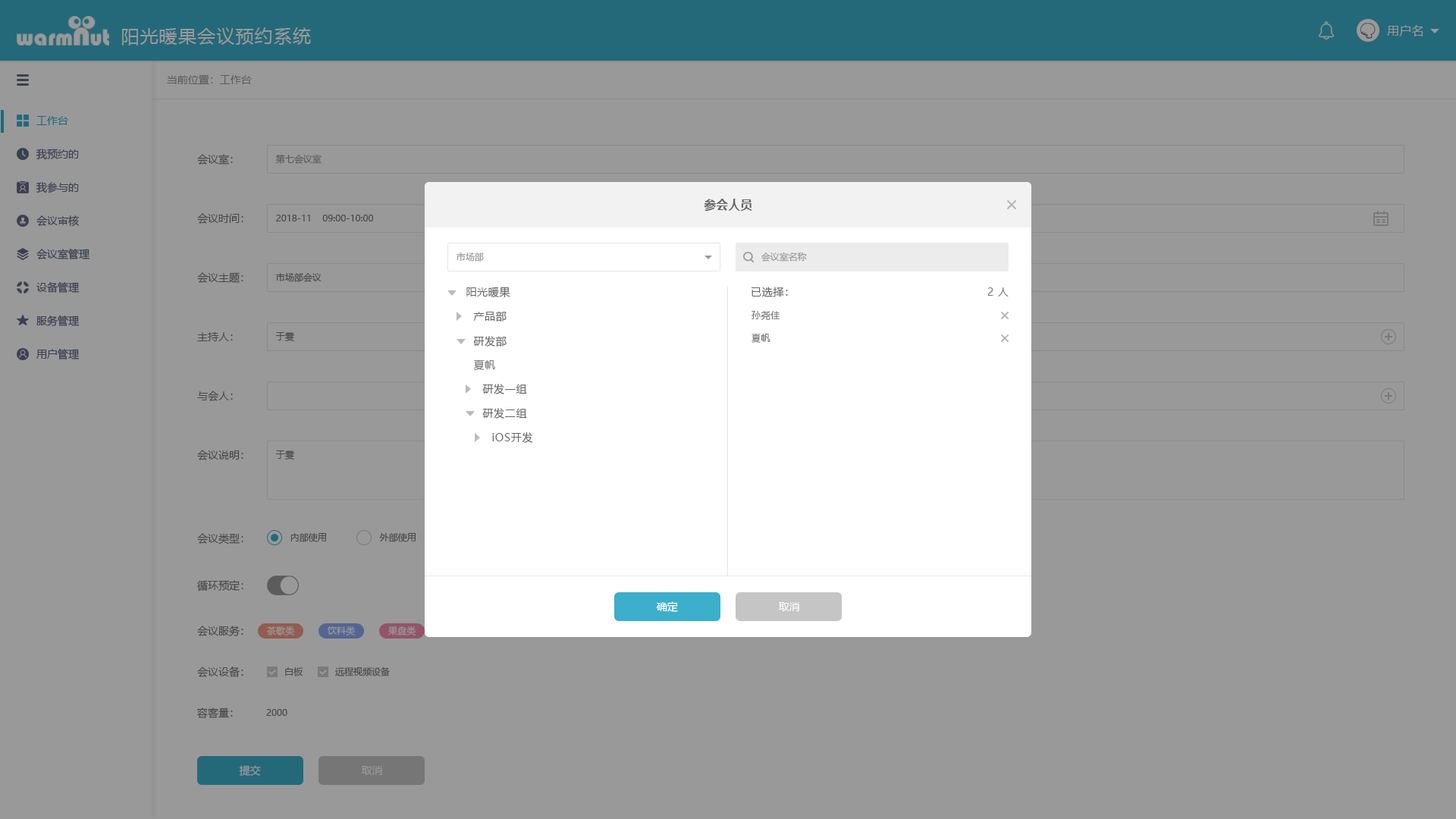
<style>
.page{position:relative;width:1456px;height:819px;background:#999999}
.page>*{position:absolute;margin:0}
.t1{font:18.2px "MicrosoftYaHei";letter-spacing:0.05em;color:#999999}
.t2{font:12.1px "MicrosoftYaHei";letter-spacing:0.025em;color:#999999}
.t3{font:10.6px "MicrosoftYaHei";color:#5c5c5c}
.t4{font:10.6px "MicrosoftYaHei";color:#24697a}
.t5{font:10.6px "MicrosoftYaHei";color:#3a4053}
.t6{font:10.6px "MicrosoftYaHei";color:#474747}
.t7{font:9.1px "MicrosoftYaHei";color:#5c5c5c}
.t8{font:12.1px "MicrosoftYaHei-Bold";color:#666666}
.t9{font:9.1px "MicrosoftYaHei";color:#474747}
.t10{font:9.1px "MicrosoftYaHei";color:#999999}
.t11{font:10.6px "MicrosoftYaHei";letter-spacing:0.05em;color:#666666}
.t12{font:10.6px "MicrosoftYaHei";letter-spacing:0.05em;color:#777777}
.t13{font:9.1px "MicrosoftYaHei";letter-spacing:0.05em;color:#777777}
.t14{font:10.6px "MicrosoftYaHei";color:#ffffff}
.t15{font:10.6px "MicrosoftYaHei";color:#999999}
</style>
<div class="page">
<p class="t1" style="left:122px;top:27px;width:189px;height:18px">阳光暖果会议预约系统</p>
<p class="t2" style="left:1387px;top:25px;width:36px;height:11px">用户名</p>
<p class="t3" style="left:167px;top:75px;width:85px;height:10px">当前位置：工作台</p>
<p class="t4" style="left:36px;top:116px;width:32px;height:9px">工作台</p>
<p class="t5" style="left:36px;top:149px;width:43px;height:11px">我预约的</p>
<p class="t6" style="left:197px;top:154px;width:36px;height:11px">会议室：</p>
<p class="t7" style="left:275px;top:154px;width:47px;height:10px">第七会议室</p>
<p class="t5" style="left:36px;top:182px;width:43px;height:11px">我参与的</p>
<p class="t8" style="left:704px;top:199px;width:48px;height:13px">参会人员</p>
<p class="t5" style="left:36px;top:215px;width:43px;height:12px">会议审核</p>
<p class="t6" style="left:197px;top:213px;width:46px;height:11px">会议时间：</p>
<p class="t9" style="left:276px;top:215px;width:98px;height:6px">2018-11    09:00-10:00</p>
<p class="t5" style="left:36px;top:249px;width:54px;height:10px">会议室管理</p>
<p class="t10" style="left:457px;top:253px;width:27px;height:9px">市场部</p>
<p class="t10" style="left:761px;top:252px;width:46px;height:10px">会议室名称</p>
<p class="t6" style="left:197px;top:272px;width:46px;height:11px">会议主题：</p>
<p class="t9" style="left:276px;top:273px;width:46px;height:9px">市场部会议</p>
<p class="t5" style="left:36px;top:282px;width:44px;height:11px">设备管理</p>
<p class="t11" style="left:466px;top:287px;width:44px;height:11px">阳光暖果</p>
<p class="t11" style="left:751px;top:287px;width:37px;height:10px">已选择：</p>
<p class="t12" style="left:987px;top:287px;width:22px;height:10px">2 人</p>
<p class="t5" style="left:36px;top:315px;width:44px;height:11px">服务管理</p>
<p class="t11" style="left:473px;top:311px;width:34px;height:11px">产品部</p>
<p class="t13" style="left:751px;top:310px;width:29px;height:10px">孙尧佳</p>
<p class="t6" style="left:197px;top:332px;width:36px;height:9px">主持人：</p>
<p class="t9" style="left:275px;top:332px;width:19px;height:9px">于雯</p>
<p class="t11" style="left:473px;top:336px;width:34px;height:11px">研发部</p>
<p class="t13" style="left:751px;top:334px;width:19px;height:9px">夏帆</p>
<p class="t5" style="left:36px;top:349px;width:44px;height:10px">用户管理</p>
<p class="t12" style="left:473px;top:359px;width:22px;height:12px">夏帆</p>
<p class="t11" style="left:482px;top:384px;width:45px;height:10px">研发一组</p>
<p class="t6" style="left:197px;top:391px;width:36px;height:10px">与会人：</p>
<p class="t11" style="left:482px;top:408px;width:45px;height:11px">研发二组</p>
<p class="t11" style="left:492px;top:432px;width:41px;height:11px">iOS开发</p>
<p class="t6" style="left:197px;top:450px;width:46px;height:10px">会议说明：</p>
<p class="t9" style="left:275px;top:450px;width:19px;height:10px">于雯</p>
<p class="t6" style="left:197px;top:533px;width:46px;height:11px">会议类型：</p>
<p class="t9" style="left:290px;top:532px;width:36px;height:10px">内部使用</p>
<p class="t9" style="left:379px;top:532px;width:37px;height:10px">外部使用</p>
<p class="t6" style="left:197px;top:580px;width:46px;height:11px">循环预定：</p>
<p class="t14" style="left:656px;top:601px;width:22px;height:11px">确定</p>
<p class="t14" style="left:778px;top:602px;width:21px;height:9px">取消</p>
<p class="t6" style="left:197px;top:626px;width:46px;height:10px">会议服务：</p>
<p class="t10" style="left:267px;top:626px;width:27px;height:9px">茶歇类</p>
<p class="t10" style="left:328px;top:626px;width:27px;height:9px">饮料类</p>
<p class="t10" style="left:388px;top:626px;width:28px;height:9px">果盘类</p>
<p class="t6" style="left:197px;top:667px;width:46px;height:10px">会议设备：</p>
<p class="t9" style="left:285px;top:667px;width:18px;height:9px">白板</p>
<p class="t9" style="left:335px;top:667px;width:55px;height:9px">远程视频设备</p>
<p class="t6" style="left:197px;top:708px;width:36px;height:10px">容客量：</p>
<p class="t9" style="left:266px;top:709px;width:21px;height:7px">2000</p>
<p class="t15" style="left:239px;top:765px;width:22px;height:11px">提交</p>
<p class="t15" style="left:361px;top:766px;width:21px;height:9px">取消</p>
</div>
